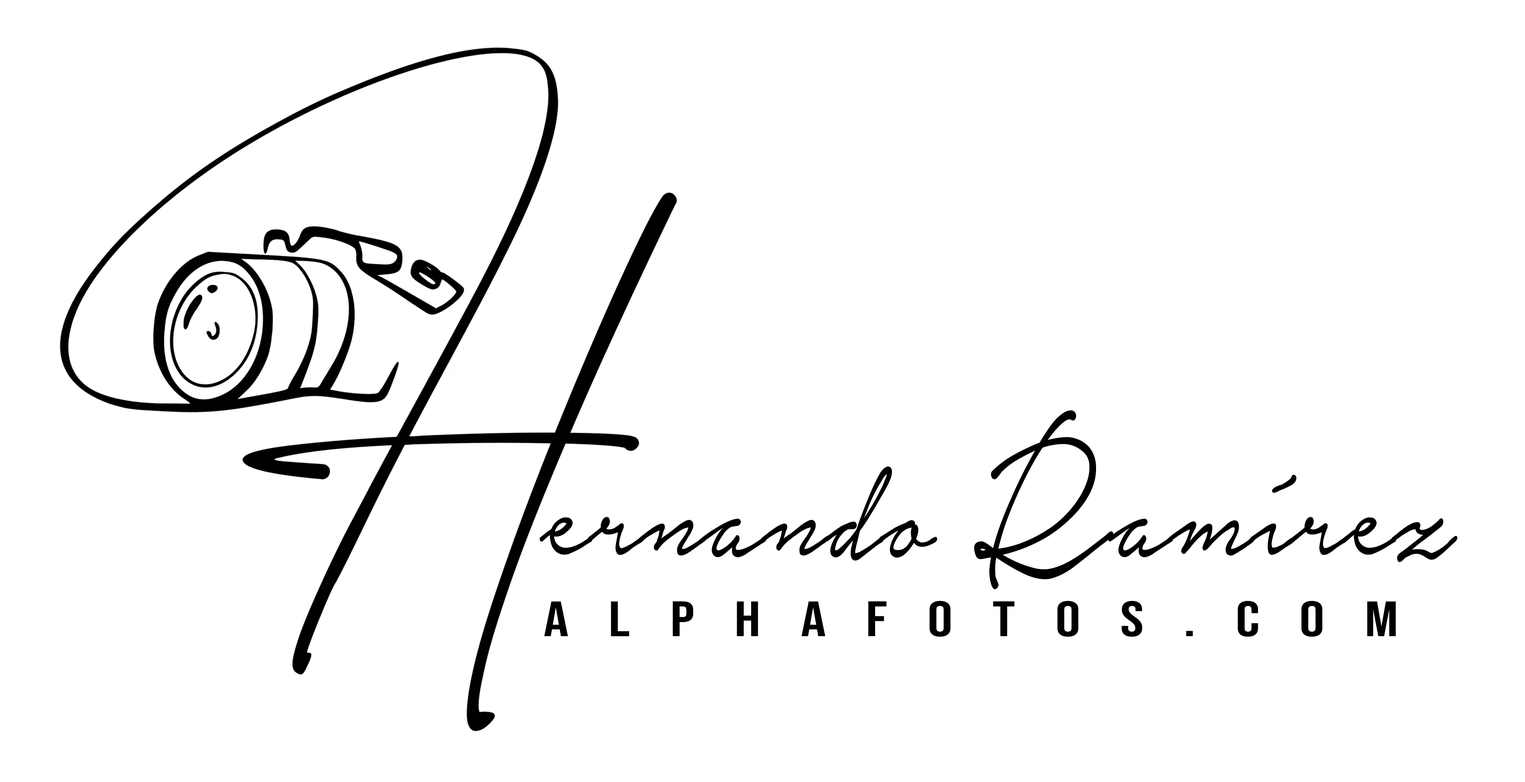
<style>
.page{position:relative;width:1525px;height:782px;background:#ffffff}
.page>*{position:absolute;margin:0}
.t1{font:202.2px "NoteraPersonalUseOnly";letter-spacing:-0.005em;color:#000000;scale:0.68 1}
.t2{font:261.6px "NoteraPersonalUseOnly";letter-spacing:-0.005em;color:#000000;scale:0.68 1}
.t3{font:49.5px "BebasNeue-Regular";letter-spacing:0.64em;color:#000000;scale:1.26 1}
</style>
<div class="page">
<p class="t1" style="left:540px;top:410px;width:917px;height:179px">ernando <span class="t2">R</span>amírez</p>
<p class="t3" style="left:544px;top:601px;width:852px;height:36px">alphafotos.com</p>
</div>
